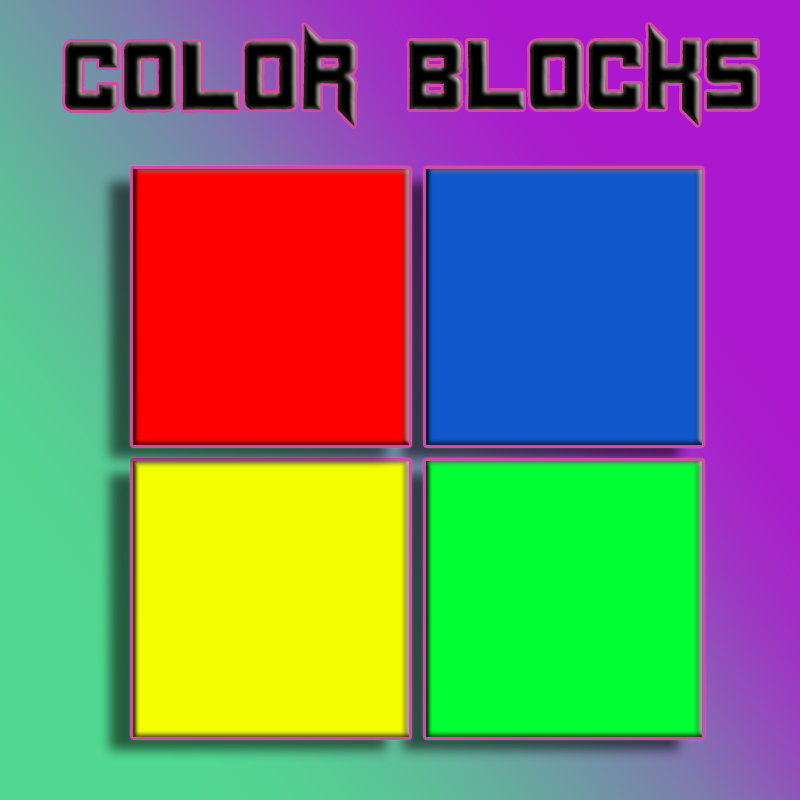
<style>
.page{position:relative;width:800px;height:800px}
.page>*{position:absolute;margin:0}
.t1{font:97.4px "Duplexide"}
</style>
<div class="page">
<p class="t1" style="left:65px;top:24px;width:693px;height:103px">COLOR BLOCKS</p>
</div>
